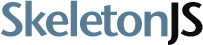
<style>
.page{position:relative;width:203px;height:45px;background:#ffffff}
.page>*{position:absolute;margin:0}
.t1{font:48px "StoneSansSemITCTTSemi";letter-spacing:-0.05em;color:#597c96}
.t2{font:48px "StoneSansSemITCTTSemi";letter-spacing:-0.05em;color:#0d0d0d}
</style>
<div class="page">
<p class="t1" style="left:0px;top:0px;width:203px;height:45px">Skeleton<span class="t2">JS</span></p>
</div>
